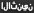
<style>
.page{position:relative;width:34px;height:13px}
.page>*{position:absolute;margin:0}
.t1{font:12.5px "NizarAqlaam";color:#ffffff}
</style>
<div class="page">
<p class="t1" style="left:1px;top:1px;width:32px;height:10px">الاثنين</p>
</div>
